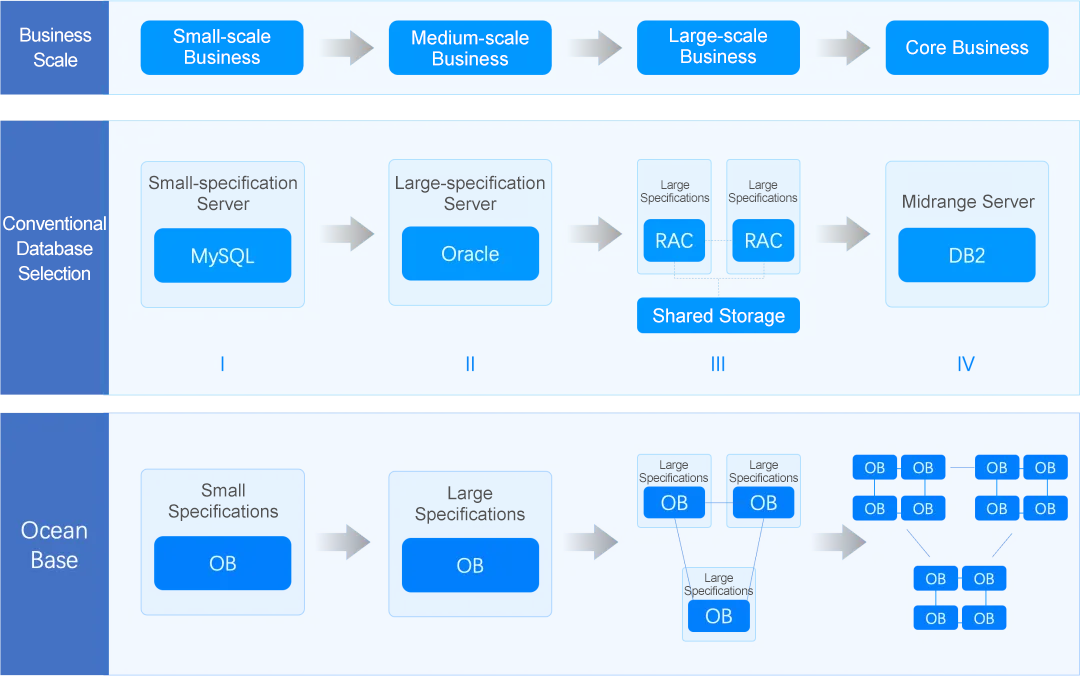
<style>
.page{position:relative;width:1080px;height:676px;background:#f2f8ff}
.page>*{position:absolute;margin:0}
.t1{font:19px/25px "ArialMT";letter-spacing:-0.03em;color:#ffffff}
.t2{font:19px/21px "ArialMT";color:#ffffff}
.t3{font:19px "ArialMT";color:#ffffff}
.t4{font:18px/21px "ArialMT";color:#525252}
.t5{font:12px/13px "ArialMT";letter-spacing:-0.03em;color:#525252}
.t6{font:18px "ArialMT";color:#525252}
</style>
<div class="page">
<p class="t1" style="left:20px;top:27px;width:72px;height:40px;text-align:center">Business Scale</p>
<p class="t2" style="left:173px;top:28px;width:98px;height:36px;text-align:center">Small-scale Business</p>
<p class="t2" style="left:412px;top:30px;width:117px;height:36px;text-align:center">Medium-scale Business</p>
<p class="t2" style="left:670px;top:28px;width:97px;height:36px;text-align:center">Large-scale Business</p>
<p class="t3" style="left:906px;top:40px;width:123px;height:15px">Core Business</p>
<p class="t4" style="left:149px;top:175px;width:148px;height:36px;text-align:center">Small-specification Server</p>
<p class="t4" style="left:396px;top:175px;width:149px;height:36px;text-align:center">Large-specification Server</p>
<p class="t5" style="left:640px;top:180px;width:70px;height:25px;text-align:center">Large Specifications</p>
<p class="t5" style="left:728px;top:180px;width:70px;height:25px;text-align:center">Large Specifications</p>
<p class="t6" style="left:903px;top:194px;width:132px;height:18px">Midrange Server</p>
<p class="t1" style="left:3px;top:216px;width:103px;height:65px;text-align:center">Conventional Database Selection</p>
<p class="t3" style="left:653px;top:308px;width:132px;height:19px">Shared Storage</p>
<p class="t5" style="left:639px;top:460px;width:69px;height:25px;text-align:center">Large Specifications</p>
<p class="t5" style="left:729px;top:460px;width:69px;height:25px;text-align:center">Large Specifications</p>
<p class="t4" style="left:168px;top:483px;width:110px;height:38px;text-align:center">Small Specifications</p>
<p class="t4" style="left:415px;top:486px;width:110px;height:38px;text-align:center">Large Specifications</p>
<p class="t5" style="left:684px;top:573px;width:69px;height:25px;text-align:center">Large Specifications</p>
</div>
